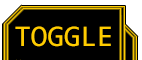
<style>
.page{position:relative;width:142px;height:60px;background:#000000}
.page>*{position:absolute;margin:0}
.t1{font:30px "Consolas";color:#ffcc00}
</style>
<div class="page">
<p class="t1" style="left:15px;top:26px;width:96px;height:21px">TOGGLE</p>
</div>
